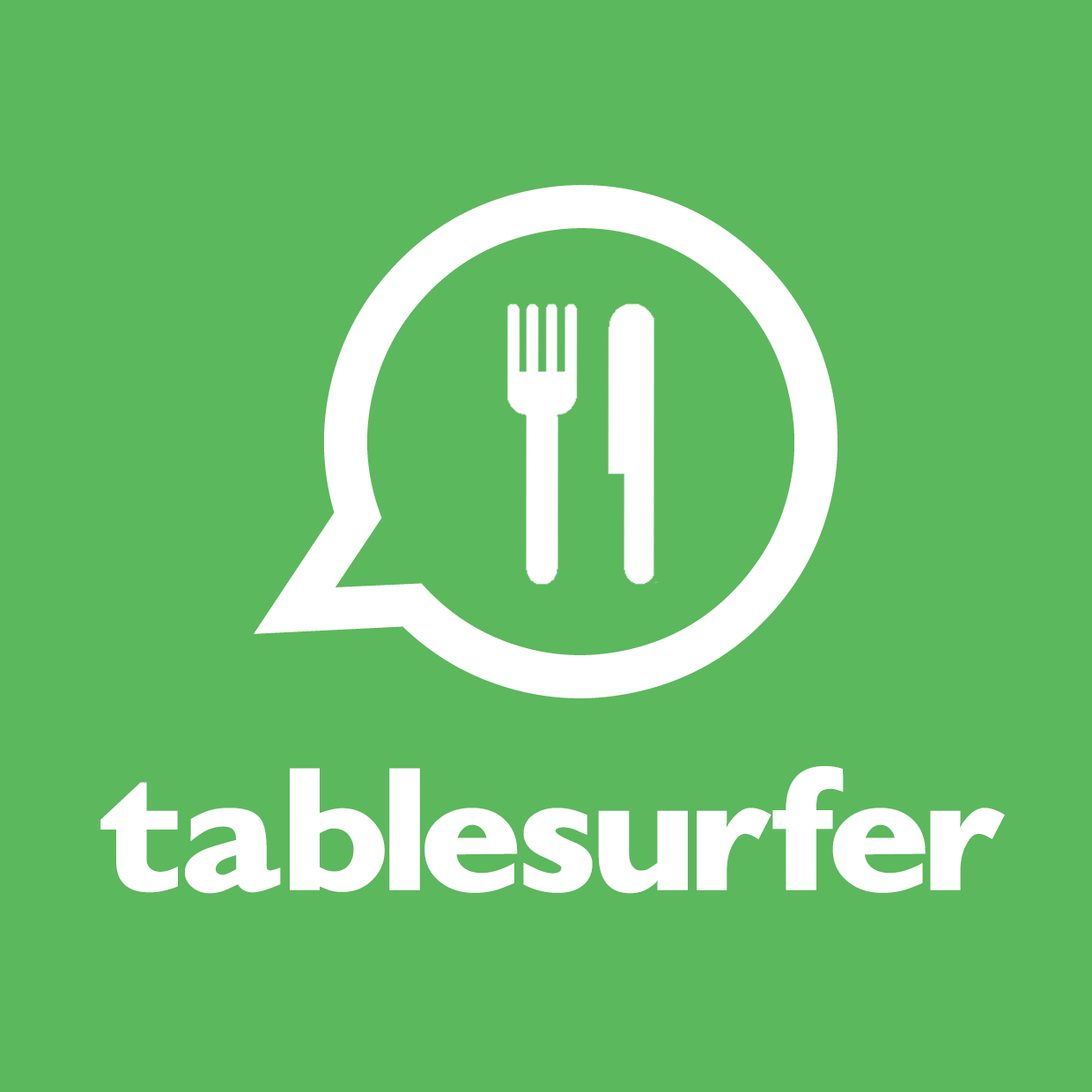
<style>
.page{position:relative;width:1092px;height:1092px;background:#5cb85c}
.page>*{position:absolute;margin:0}
.t1{font:172.2px "Gibson-Bold";letter-spacing:-0.065em;color:#ffffff;scale:1.09 1}
.t2{font:172.2px "Gibson-Bold";letter-spacing:0.045em;color:#ffffff;scale:1.09 1}
.t3{font:172.2px "Gibson-Bold";letter-spacing:-0.01em;color:#ffffff;scale:1.09 1}
.t4{font:172.2px "Gibson-Bold";letter-spacing:-0.09em;color:#ffffff;scale:1.09 1}
.t5{font:172.2px "Gibson-Bold";letter-spacing:-0.05em;color:#ffffff;scale:1.09 1}
.t6{font:172.2px "Gibson-Bold";letter-spacing:-0.015em;color:#ffffff;scale:1.09 1}
.t7{font:172.2px "Gibson-Bold";letter-spacing:-0.04em;color:#ffffff;scale:1.09 1}
.t8{font:172.2px "Gibson-Bold";letter-spacing:-0.07em;color:#ffffff;scale:1.09 1}
.t9{font:172.2px "Gibson-Bold";letter-spacing:0.03em;color:#ffffff;scale:1.09 1}
.t10{font:172.2px "Gibson-Bold";letter-spacing:-0.035em;color:#ffffff;scale:1.09 1}
</style>
<div class="page">
<p class="t1" style="left:100px;top:766px;width:905px;height:128px"><span class="t2">t</span><span class="t3">a</span><span class="t4">b</span><span class="t5">l</span><span class="t6">e</span><span class="t7">s</span><span class="t8">u</span><span class="t9">r</span><span class="t10">f</span>er</p>
</div>
